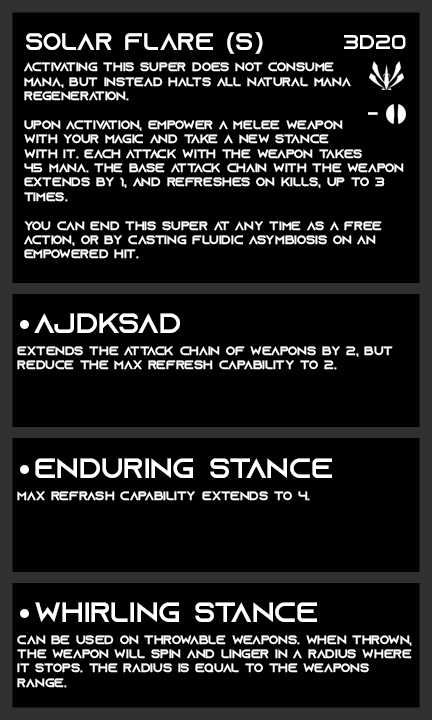
<style>
.page{position:relative;width:432px;height:720px;background:#000000}
.page>*{position:absolute;margin:0}
.t1{font:24px "AzonixRegular";color:#ffffff}
.t2{font:20px "AzonixRegular";color:#ffffff}
.t3{font:12px "AzonixRegular";color:#ffffff}
.t4{font:28px "AzonixRegular";color:#ffffff}
</style>
<div class="page">
<p class="t1" style="left:26px;top:32px;width:237px;height:22px">solar flare (s)</p>
<p class="t2" style="left:344px;top:35px;width:62px;height:14px">3d20</p>
<p class="t3" style="left:24px;top:62px;width:380px;height:197px">activating this super does not consume <br>mana, but instead halts all natural mana<br>regeneration.<br><br>upon activation, empower a melee weapon <br>with your magic and take a new stance <br>with it. each attack with the weapon takes <br>45 mana. the base attack chain with the weapon<br>extends by 1, and refreshes on kills, up to 3 <br>times.<br><br>you can end this super at any time as a free <br>action, or by casting fluidic asymbiosis on an <br>empowered hit.</p>
<p class="t2" style="left:368px;top:112px;width:10px;height:3px">-</p>
<p class="t4" style="left:34px;top:313px;width:146px;height:20px">ajdksad</p>
<p class="t3" style="left:17px;top:346px;width:376px;height:24px">extends the attack chain of weapons by 2, but <br>reduce the max refresh capability to 2.</p>
<p class="t4" style="left:35px;top:458px;width:297px;height:20px">enduring stance</p>
<p class="t3" style="left:17px;top:491px;width:293px;height:10px">max refrash capability extends to 4.</p>
<p class="t4" style="left:35px;top:602px;width:282px;height:20px">whirling stance</p>
<p class="t3" style="left:17px;top:635px;width:395px;height:53px">can be used on throwable weapons. when thrown,<br>the weapon will spin and linger in a radius where<br>it stops. the radius is equal to the weapons<br>range.</p>
</div>
